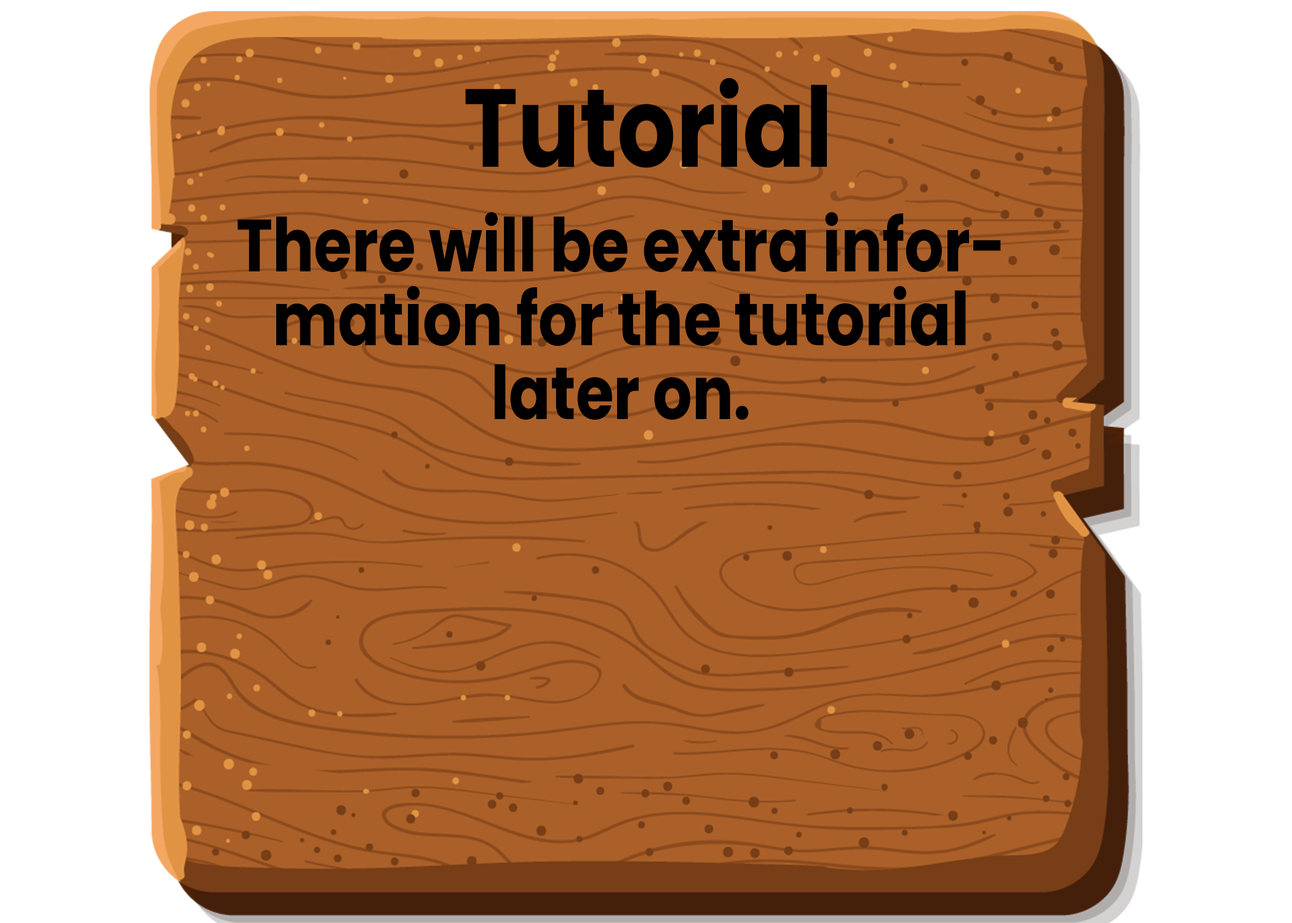
<style>
.page{position:relative;width:1292px;height:923px;background:#aa6028}
.page>*{position:absolute;margin:0}
.t1{font:110.7px "Poppins-Bold";color:#000000;scale:0.83 1}
.t2{font:73.8px "Poppins-Bold";color:#000000;scale:0.83 1}
</style>
<div class="page">
<p class="t1" style="left:465px;top:78px;width:362px;height:90px">Tutorial</p>
<p class="t2" style="left:237px;top:212px;width:764px;height:208px;text-align:center">There will be extra infor-<br>mation for the tutorial<br>later on.</p>
</div>
